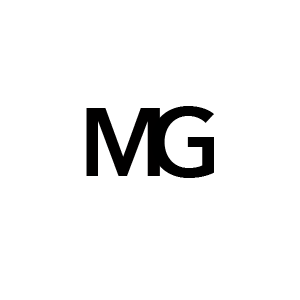
<style>
.page{position:relative;width:300px;height:300px;background:#ffffff}
.page>*{position:absolute;margin:0}
.t1{font:96px "AvenirNext-DemiBold";color:#010000}
.t2{font:96px "AvenirNext-DemiBold";color:#000000}
</style>
<div class="page">
<p class="t1" style="left:86px;top:108px;width:74px;height:68px">M</p>
<p class="t2" style="left:151px;top:106px;width:63px;height:72px">G</p>
</div>
